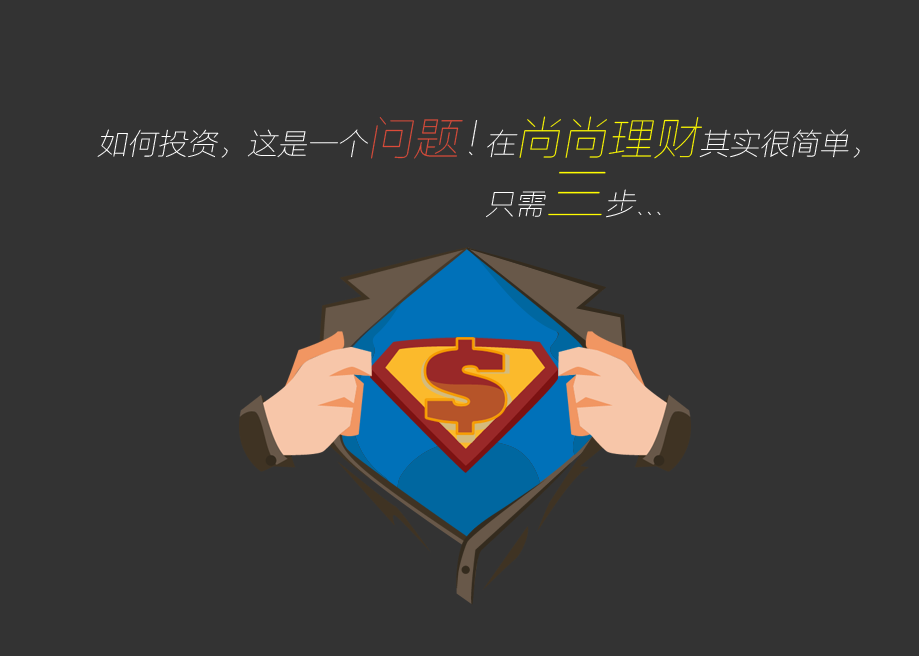
<style>
.page{position:relative;width:919px;height:656px;background:#333333}
.page>*{position:absolute;margin:0}
.t1{font:30px "FZLTCXHJW--GB1-0";color:#ffffff;font-style:italic}
.t2{font:46px "FZLTCXHJW--GB1-0";color:#dd4b39;font-style:italic}
.t3{font:46px "FZLTCXHJW--GB1-0";color:#ffffff;font-style:italic}
.t4{font:30px/48px "FZLTCXHJW--GB1-0";color:#ffffff;font-style:italic}
.t5{font:46px/48px "FZLTCXHJW--GB1-0";color:#fffc00;font-style:italic}
.t6{font:60px/48px "FZLTCXHJW--GB1-0";color:#fffc00;font-style:italic}
</style>
<div class="page">
<p class="t1" style="left:97px;top:117px;width:381px;height:42px">如何投资，这是一个<span class="t2">问题</span><span class="t3">！</span></p>
<p class="t4" style="left:486px;top:116px;width:374px;height:102px">在<span class="t5">尚尚理财</span>其实很简单， <br>只需<span class="t6">三</span>步...</p>
</div>
